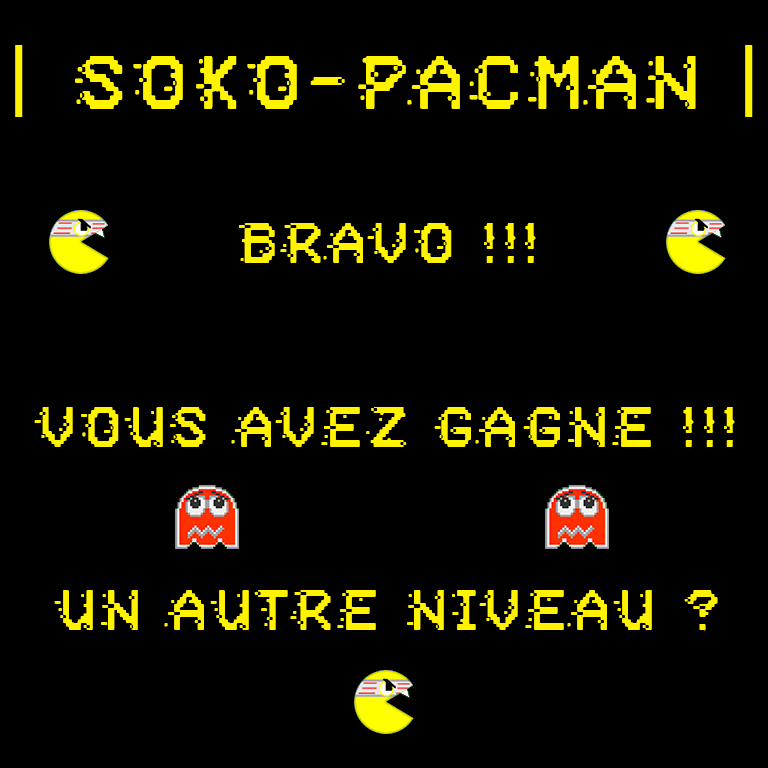
<style>
.page{position:relative;width:768px;height:768px;background:#000000}
.page>*{position:absolute;margin:0}
.t1{font:76.2px "PositiveSystem";letter-spacing:0.2em;color:#fff300;scale:0.89 1}
.t2{font:76.2px "Geometos";letter-spacing:0.2em;color:#fff300;scale:0.89 1}
.t3{font:57.1px "PositiveSystem";letter-spacing:0.2em;color:#fff300;scale:0.89 1}
</style>
<div class="page">
<p class="t1" style="left:15px;top:45px;width:738px;height:72px"><span class="t2">| </span>SOKO-PACMAN <span class="t2">|</span></p>
<p class="t3" style="left:34px;top:223px;width:701px;height:408px;text-align:center">BRAvo !!!<br><br><br>Vous avez gagné !!!<br><br><br>Un autre niveau ?</p>
</div>
